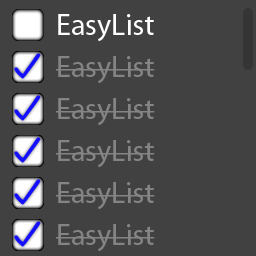
<style>
.page{position:relative;width:256px;height:256px;background:#414141}
.page>*{position:absolute;margin:0}
.t1{font:30px "MyriadPro-Regular";color:#ffffff}
.t2{font:30px "MyriadPro-Regular";color:#848484}
</style>
<div class="page">
<p class="t1" style="left:58px;top:14px;width:96px;height:28px">EasyList</p>
<p class="t2" style="left:56px;top:56px;width:99px;height:28px">EasyList</p>
<p class="t2" style="left:56px;top:98px;width:99px;height:28px">EasyList</p>
<p class="t2" style="left:56px;top:140px;width:99px;height:28px">EasyList</p>
<p class="t2" style="left:56px;top:182px;width:99px;height:28px">EasyList</p>
<p class="t2" style="left:56px;top:224px;width:99px;height:28px">EasyList</p>
</div>
